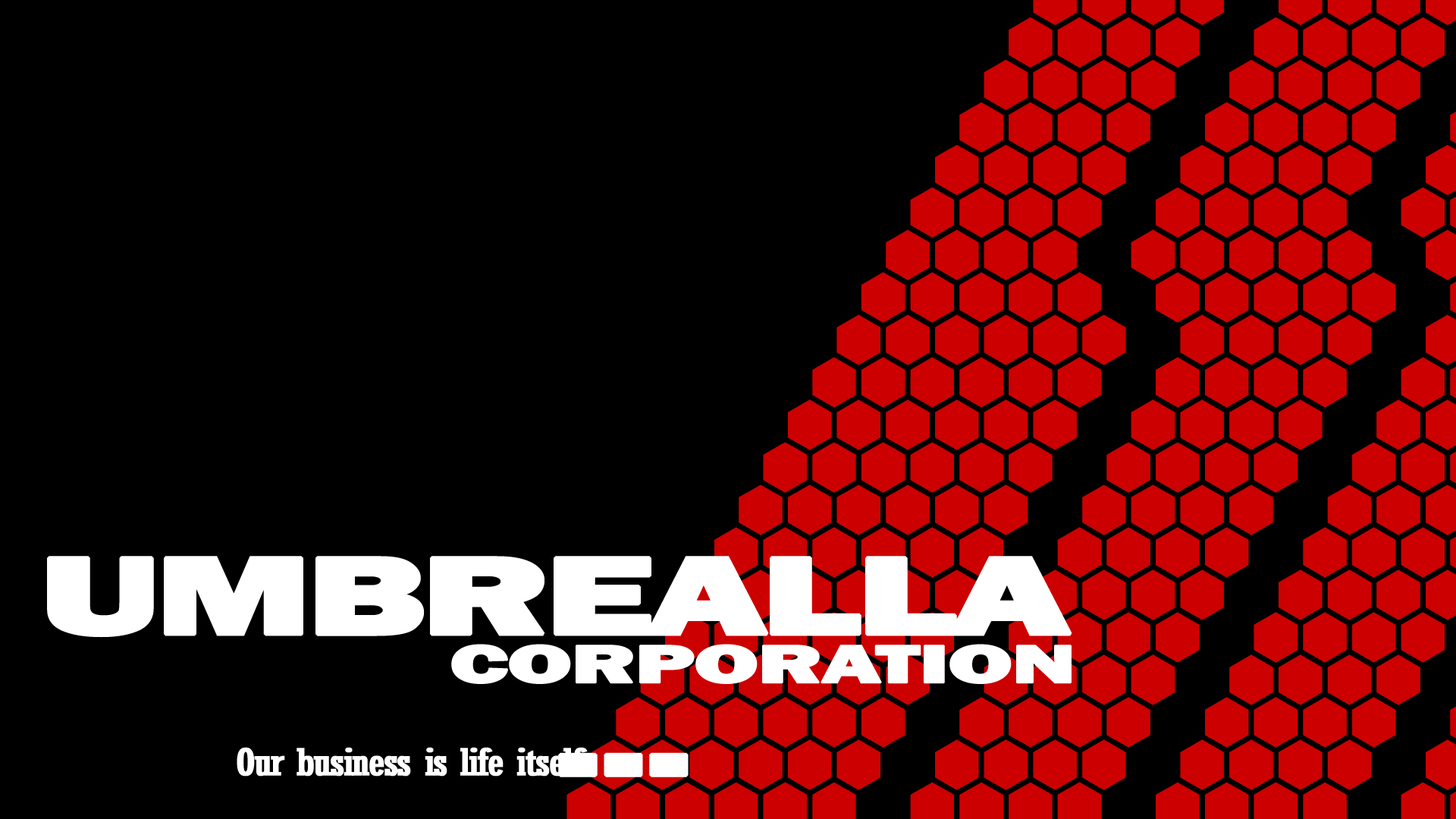
<style>
.page{position:relative;width:1456px;height:819px;background:#000000}
.page>*{position:absolute;margin:0}
.t1{font:113.7px "FranklinGothic-Heavy";letter-spacing:-0.06em;color:#ffffff;text-transform:uppercase;font-weight:bold;scale:1.65 1}
.t2{font:55.2px "FranklinGothic-Heavy";letter-spacing:-0.04em;color:#ffffff;font-weight:bold;scale:1.7 1}
.t3{font:36.8px "Rockwell-Condensed";letter-spacing:-0.06em;color:#ffffff;font-weight:bold;scale:1.29 1}
</style>
<div class="page">
<p class="t1" style="left:47px;top:556px;width:1025px;height:82px">umbrealla</p>
<p class="t2" style="left:451px;top:644px;width:621px;height:40px">CORPORATION</p>
<p class="t3" style="left:237px;top:747px;width:351px;height:30px">Our business is life itself</p>
<p class="t1" style="left:558px;top:752px;width:131px;height:25px">...</p>
</div>
